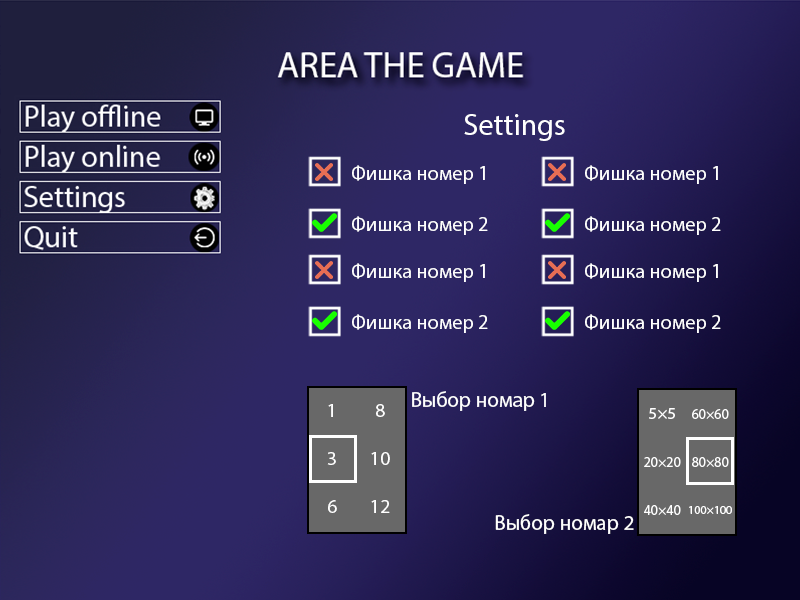
<style>
.page{position:relative;width:800px;height:600px}
.page>*{position:absolute;margin:0}
.t1{font:30px "MyriadPro-Regular";color:#ffffff}
.t2{font:20.5px "MyriadPro-Regular";color:#ffffff}
.t3{font:21.3px "MyriadPro-Regular";color:#ffffff}
.t4{font:19.7px "MyriadPro-Regular";color:#ffffff}
.t5{font:17px "MyriadPro-Regular";color:#ffffff}
.t6{font:14px "MyriadPro-Regular";color:#ffffff}
.t7{font:12px "MyriadPro-Regular";color:#ffffff}
</style>
<div class="page">
<p class="t1" style="left:464px;top:114px;width:101px;height:27px">Settings</p>
<p class="t2" style="left:352px;top:165px;width:133px;height:19px">Фишка номер 1</p>
<p class="t2" style="left:585px;top:165px;width:133px;height:19px">Фишка номер 1</p>
<p class="t2" style="left:352px;top:216px;width:136px;height:19px">Фишка номер 2</p>
<p class="t2" style="left:585px;top:216px;width:136px;height:19px">Фишка номер 2</p>
<p class="t2" style="left:352px;top:263px;width:133px;height:19px">Фишка номер 1</p>
<p class="t2" style="left:585px;top:263px;width:133px;height:19px">Фишка номер 1</p>
<p class="t2" style="left:352px;top:314px;width:136px;height:19px">Фишка номер 2</p>
<p class="t2" style="left:585px;top:314px;width:136px;height:19px">Фишка номер 2</p>
<p class="t3" style="left:412px;top:391px;width:134px;height:20px">Выбор номар 1</p>
<p class="t4" style="left:328px;top:404px;width:5px;height:13px">1</p>
<p class="t4" style="left:376px;top:404px;width:9px;height:13px">8</p>
<p class="t5" style="left:649px;top:408px;width:26px;height:11px">5×5</p>
<p class="t6" style="left:692px;top:409px;width:37px;height:10px">60×60</p>
<p class="t4" style="left:327px;top:452px;width:9px;height:13px">3</p>
<p class="t4" style="left:371px;top:452px;width:19px;height:13px">10</p>
<p class="t6" style="left:644px;top:457px;width:37px;height:10px">20×20</p>
<p class="t6" style="left:692px;top:457px;width:37px;height:10px">80×80</p>
<p class="t4" style="left:328px;top:500px;width:9px;height:13px">6</p>
<p class="t4" style="left:371px;top:500px;width:19px;height:13px">12</p>
<p class="t6" style="left:644px;top:505px;width:37px;height:10px">40×40</p>
<p class="t7" style="left:689px;top:506px;width:43px;height:8px">100×100</p>
<p class="t3" style="left:495px;top:514px;width:139px;height:20px">Выбор номар 2</p>
</div>
